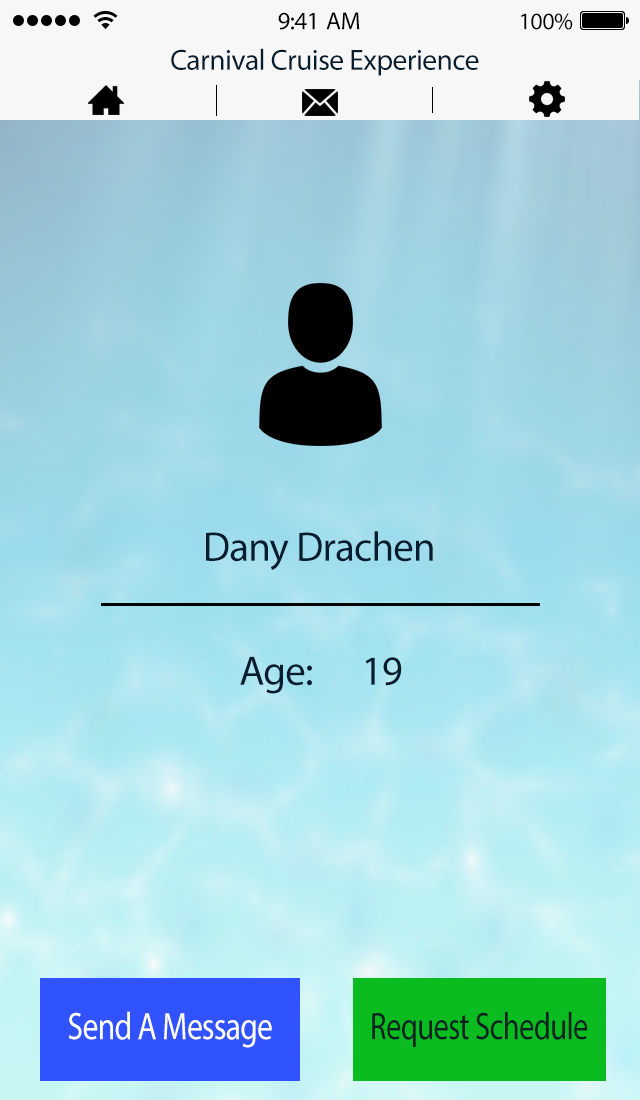
<style>
.page{position:relative;width:640px;height:1100px}
.page>*{position:absolute;margin:0}
.t1{font:25px "MyriadPro-Regular";letter-spacing:-0.02em;color:#000000}
.t2{font:24px "MyriadPro-Regular";letter-spacing:-0.02em;color:#000000}
.t3{font:29.4px "MyriadPro-Regular";letter-spacing:-0.02em;color:#061d30}
.t4{font:41.4px "MyriadPro-Regular";letter-spacing:-0.02em;color:#061d30}
.t5{font:38.6px "MyriadPro-Regular";letter-spacing:-0.02em;color:#ffffff;scale:0.81 1}
.t6{font:38.6px "MyriadPro-Regular";letter-spacing:-0.02em;color:#0a2320;scale:0.79 1}
</style>
<div class="page">
<p class="t1" style="left:278px;top:12px;width:82px;height:18px">9:41 AM</p>
<p class="t2" style="left:521px;top:13px;width:52px;height:17px">100%</p>
<p class="t3" style="left:171px;top:48px;width:308px;height:28px">Carnival Cruise Experience</p>
<p class="t4" style="left:206px;top:531px;width:227px;height:39px">Dany Drachen</p>
<p class="t4" style="left:240px;top:656px;width:162px;height:38px">Age:  19</p>
<p class="t5" style="left:68px;top:1011px;width:204px;height:37px">Send A Message</p>
<p class="t6" style="left:372px;top:1011px;width:216px;height:36px">Request Schedule</p>
</div>
